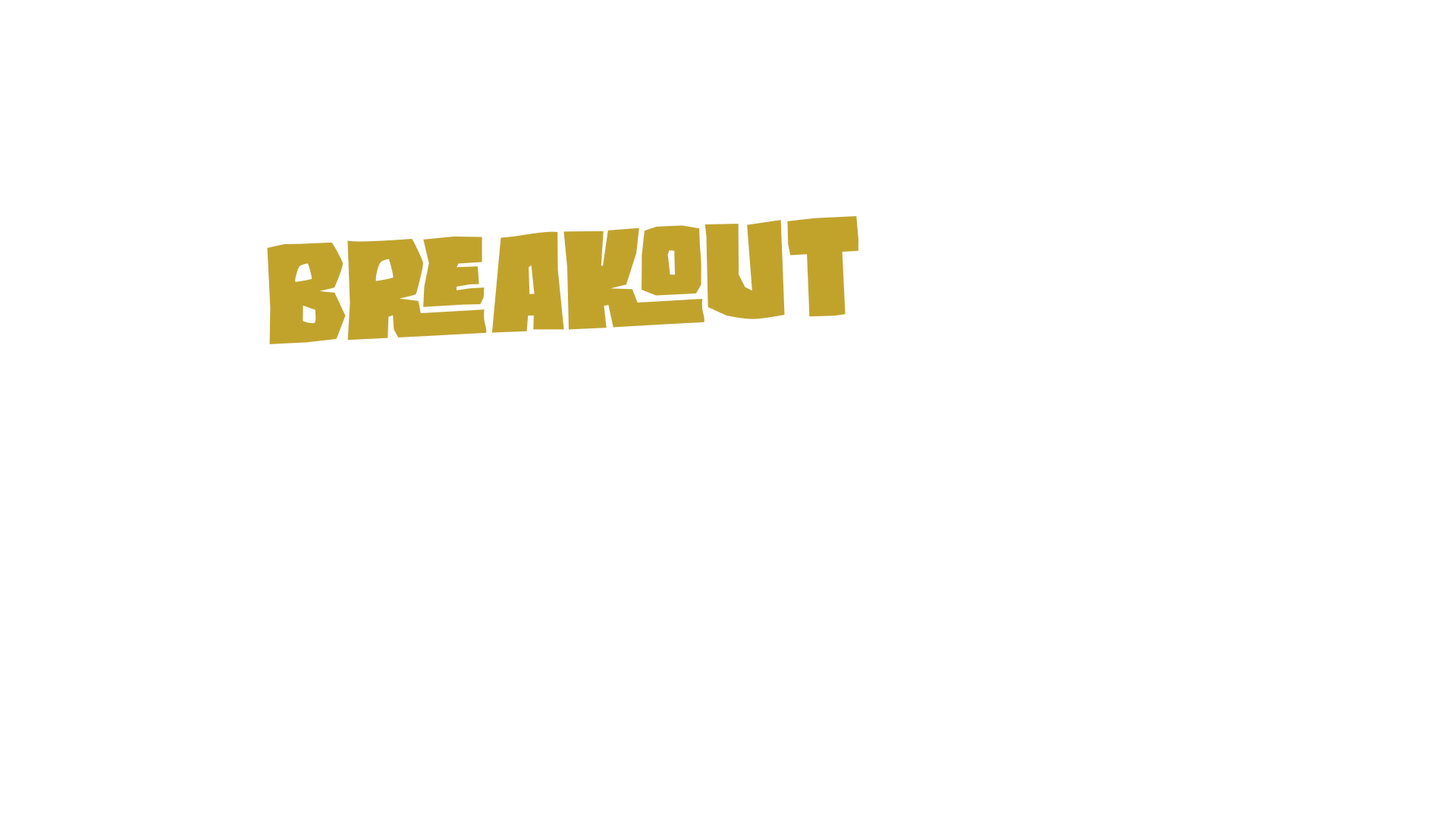
<style>
.page{position:relative;width:1456px;height:819px;background:#ffffff}
.page>*{position:absolute;margin:0}
.t1{font:155.8px "RoaringJungle";color:#c1a32c}
.t2{font:157.7px "RoaringJungle";color:#c1a32c}
</style>
<div class="page">
<p class="t1" style="left:261px;top:213px;width:585px;height:127px;rotate:-3deg">BREAKOUT</p>
<p class="t2" style="left:267px;top:216px;width:591px;height:128px;rotate:-3deg">BREAKOUT</p>
</div>
